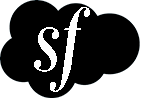
<style>
.page{position:relative;width:142px;height:98px;background:#000000}
.page>*{position:absolute;margin:0}
.t1{font:100px "BodoniMTCondensed-Italic";color:#ffffff}
</style>
<div class="page">
<p class="t1" style="left:34px;top:7px;width:56px;height:85px">sf</p>
</div>
